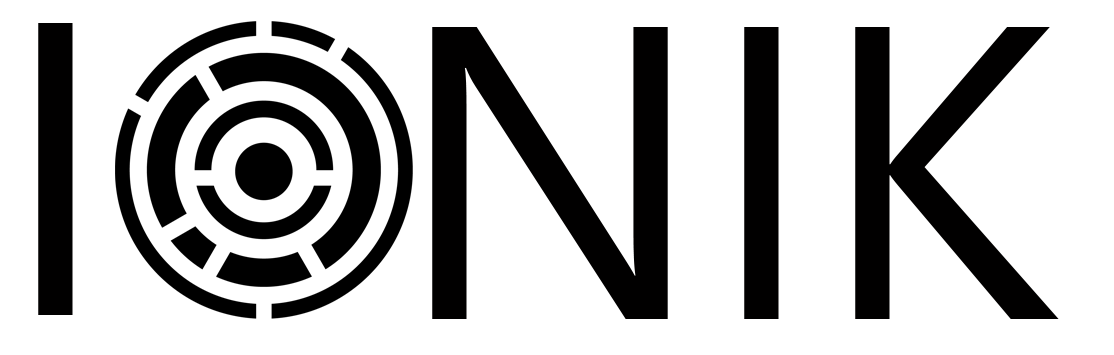
<style>
.page{position:relative;width:1114px;height:355px;background:#ffffff}
.page>*{position:absolute;margin:0}
.t1{font:416.7px "SegoeUIHistoric";color:#010000}
</style>
<div class="page">
<p class="t1" style="left:432px;top:27px;width:627px;height:292px">NIK</p>
</div>
